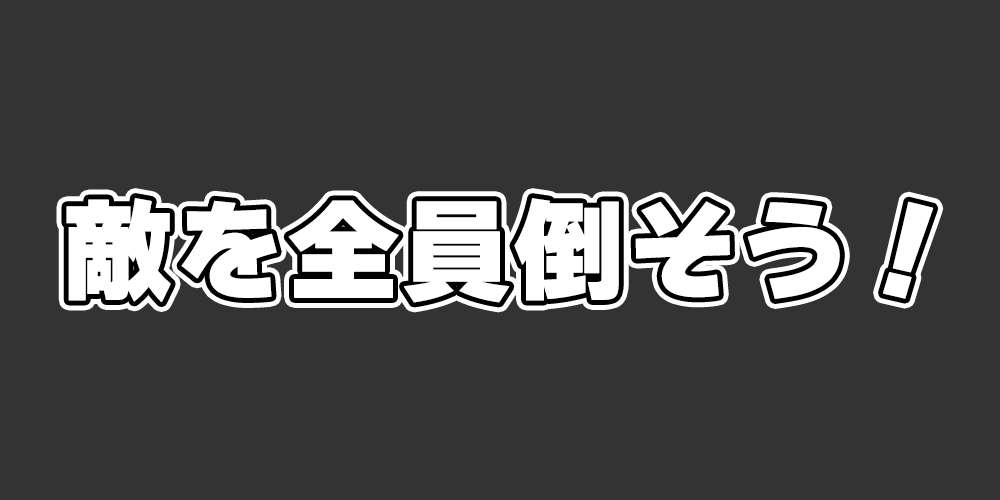
<style>
.page{position:relative;width:1000px;height:500px;background:#333333}
.page>*{position:absolute;margin:0}
.t1{font:110px "WanpakuRuika-08";color:#ffffff;font-weight:bold}
</style>
<div class="page">
<p class="t1" style="left:66px;top:198px;width:868px;height:105px">敵を全員倒そう！</p>
</div>
